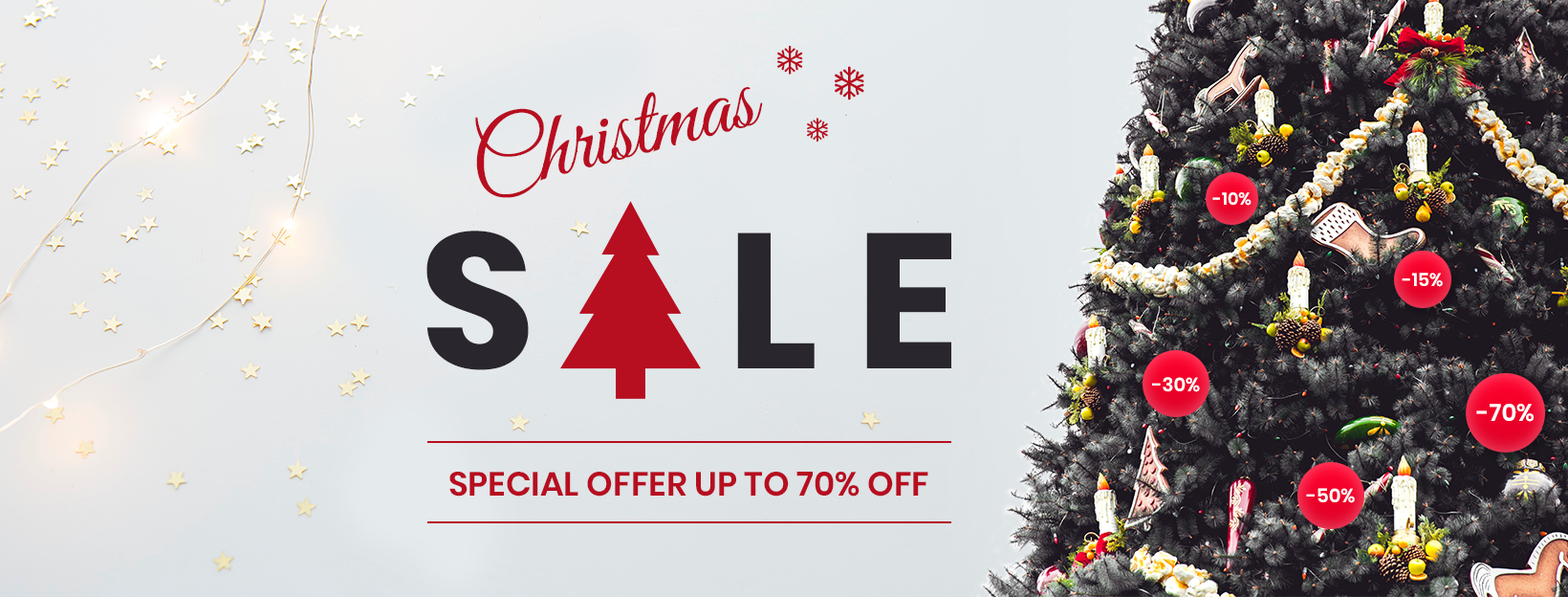
<style>
.page{position:relative;width:1568px;height:597px}
.page>*{position:absolute;margin:0}
.t1{font:95.6px "GreatVibes-Regular";color:#b70e20}
.t2{font:17.2px "Poppins-SemiBold";color:#ffffff}
.t3{font:191.2px "Poppins-Bold";color:#2a262d}
.t4{font:18.2px "Poppins-SemiBold";color:#ffffff}
.t5{font:19.1px "Poppins-SemiBold";color:#ffffff}
.t6{font:23.9px "Poppins-SemiBold";color:#ffffff}
.t7{font:33.5px "Poppins-SemiBold";color:#b70e20}
</style>
<div class="page">
<p class="t1" style="left:475px;top:87px;width:288px;height:111px;rotate:-14deg">Christmas</p>
<p class="t2" style="left:1212px;top:192px;width:40px;height:14px">-10%</p>
<p class="t3" style="left:426px;top:230px;width:525px;height:140px">S     L E</p>
<p class="t4" style="left:1402px;top:272px;width:41px;height:15px">-15%</p>
<p class="t5" style="left:1152px;top:377px;width:48px;height:15px">-30%</p>
<p class="t6" style="left:1476px;top:403px;width:58px;height:19px">-70%</p>
<p class="t7" style="left:449px;top:471px;width:479px;height:25px">SPECIAL OFFER UP TO 70% OFF</p>
<p class="t5" style="left:1306px;top:488px;width:49px;height:15px">-50%</p>
</div>
